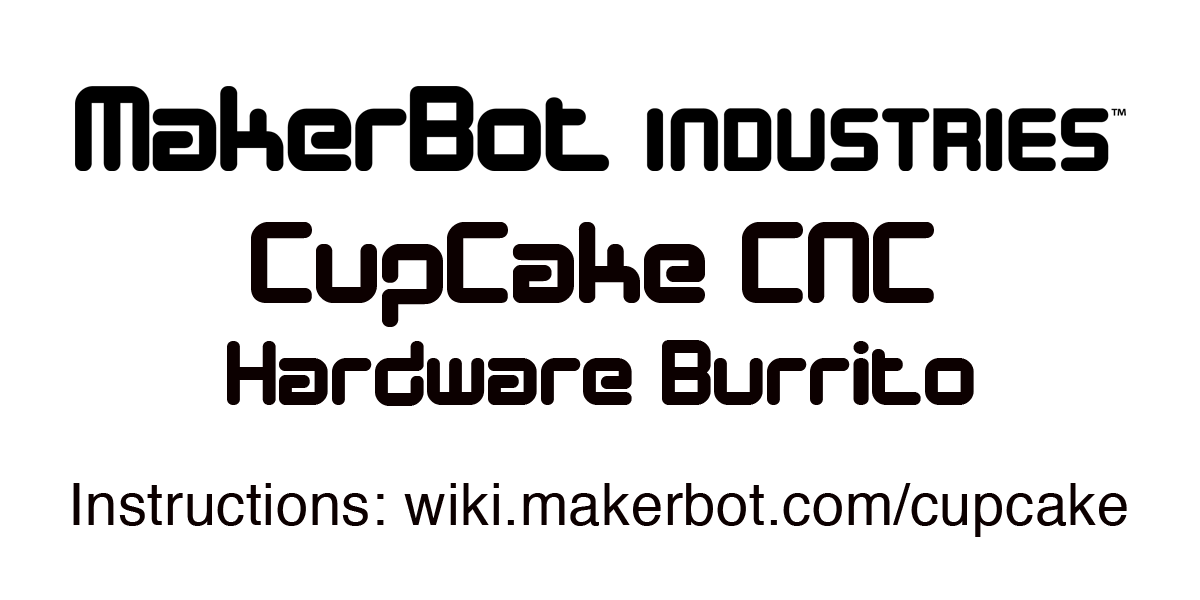
<style>
.page{position:relative;width:1200px;height:600px;background:#ffffff}
.page>*{position:absolute;margin:0}
.t1{font:118.1px "DesignerBlock";letter-spacing:0.01em;color:#0c0000}
.t2{font:94.5px "DesignerBlock";letter-spacing:0.01em;color:#0c0000}
.t3{font:57.9px "Helvetica";letter-spacing:0.01em;color:#0c0000}
</style>
<div class="page">
<p class="t1" style="left:251px;top:222px;width:683px;height:105px">CupCake CNC</p>
<p class="t2" style="left:227px;top:340px;width:747px;height:66px">Hardware Burrito</p>
<p class="t3" style="left:73px;top:483px;width:1054px;height:54px">Instructions: wiki.makerbot.com/cupcake</p>
</div>
